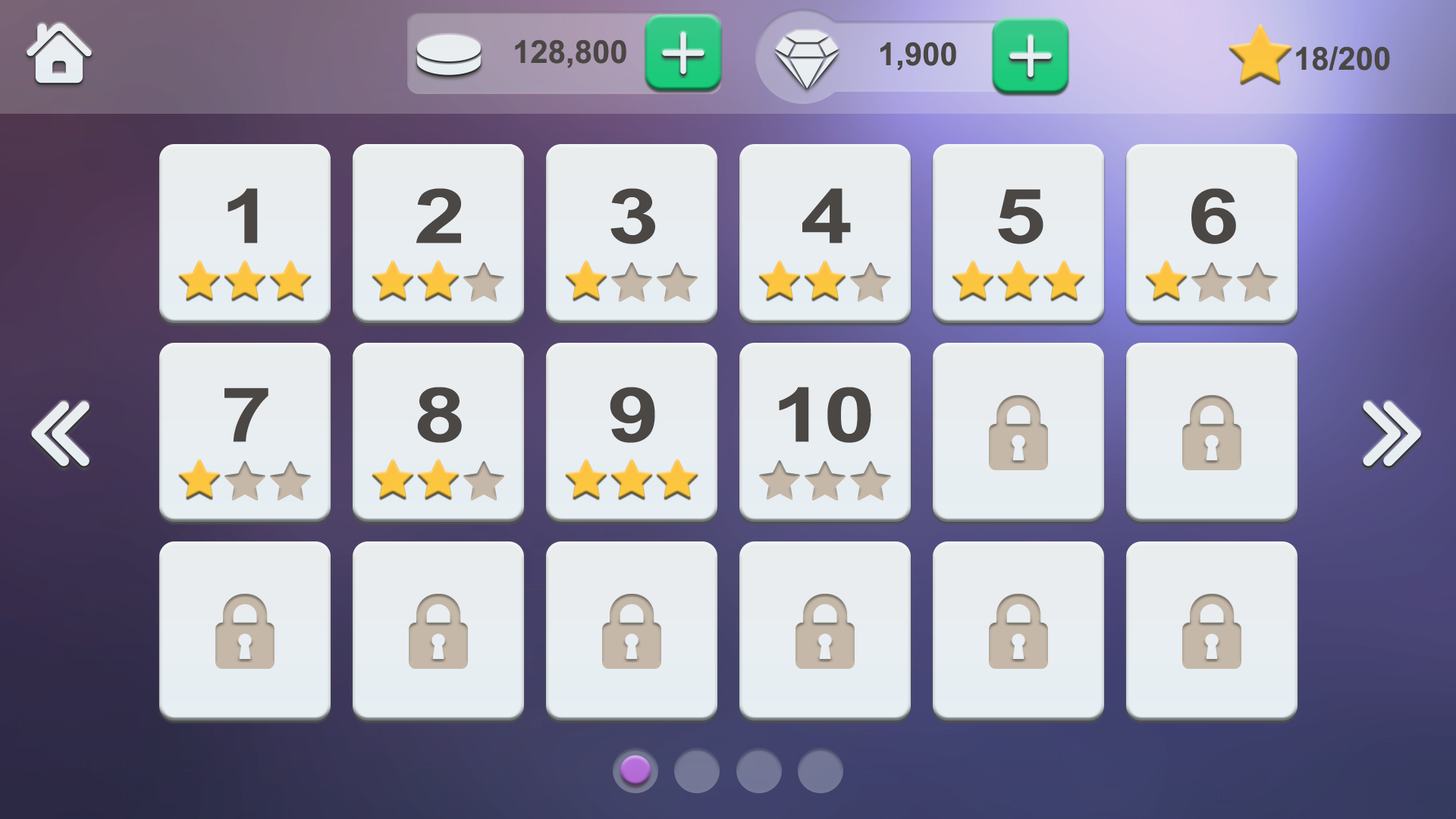
<style>
.page{position:relative;width:1456px;height:819px}
.page>*{position:absolute;margin:0}
.t1{font:31.8px "Arial-BoldMT";color:#4a4744}
.t2{font:75.8px "Arial-BoldMT";color:#4a4744;scale:1.23 1}
</style>
<div class="page">
<p class="t1" style="left:515px;top:39px;width:111px;height:29px">128,800</p>
<p class="t1" style="left:880px;top:42px;width:76px;height:29px">1,900</p>
<p class="t1" style="left:1296px;top:46px;width:94px;height:25px">18/200</p>
<p class="t2" style="left:227px;top:188px;width:31px;height:55px">1</p>
<p class="t2" style="left:416px;top:188px;width:45px;height:55px">2</p>
<p class="t2" style="left:610px;top:188px;width:45px;height:56px">3</p>
<p class="t2" style="left:802px;top:188px;width:49px;height:55px">4</p>
<p class="t2" style="left:998px;top:189px;width:45px;height:55px">5</p>
<p class="t2" style="left:1191px;top:188px;width:45px;height:56px">6</p>
<p class="t2" style="left:224px;top:388px;width:44px;height:54px">7</p>
<p class="t2" style="left:417px;top:387px;width:45px;height:56px">8</p>
<p class="t2" style="left:610px;top:387px;width:45px;height:56px">9</p>
<p class="t2" style="left:779px;top:387px;width:92px;height:56px">10</p>
</div>
